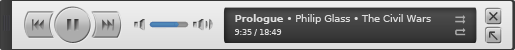
<style>
.page{position:relative;width:515px;height:50px}
.page>*{position:absolute;margin:0}
.t1{font:10px "DejaVuSans";letter-spacing:-0.018em;color:#dcdcdc}
.t2{font:10px "DejaVuSans-Bold";letter-spacing:-0.018em;color:#dcdcdc}
.t3{font:8px "DejaVuSans";letter-spacing:-0.018em;color:#dcdcdc}
</style>
<div class="page">
<p class="t1" style="left:235px;top:14px;width:196px;height:10px"><span class="t2">Prologue</span> • Philip Glass • The Civil Wars</p>
<p class="t3" style="left:235px;top:29px;width:47px;height:7px">9:35 / 18:49</p>
</div>
